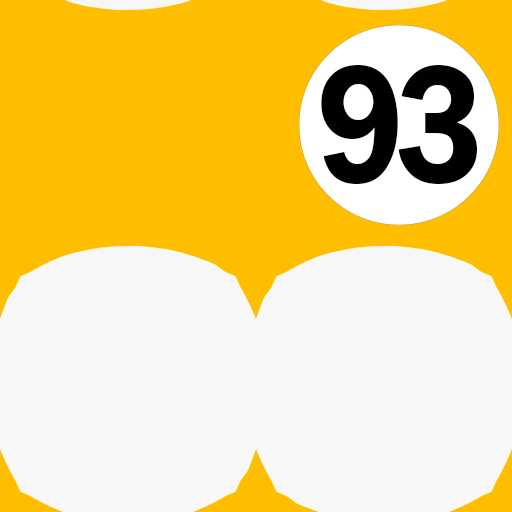
<style>
.page{position:relative;width:512px;height:512px;background:#f7f7f7}
.page>*{position:absolute;margin:0}
.t1{font:172.5px "FranklinGothic-Demi";letter-spacing:-0.05em;color:#010101;scale:0.87 1}
</style>
<div class="page">
<p class="t1" style="left:321px;top:65px;width:156px;height:119px">93</p>
</div>
